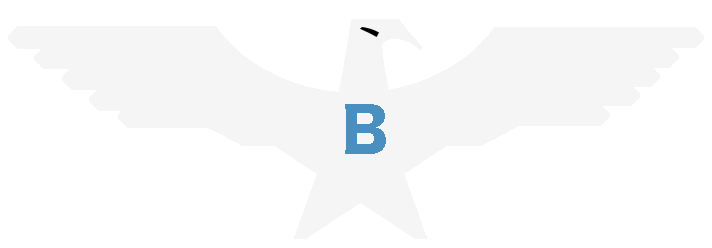
<style>
.page{position:relative;width:712px;height:248px;background:#ffffff}
.page>*{position:absolute;margin:0}
.t1{font:60px "HiraKakuStdN-W8";color:#4990c0}
</style>
<div class="page">
<p class="t1" style="left:345px;top:104px;width:41px;height:50px">B</p>
</div>
